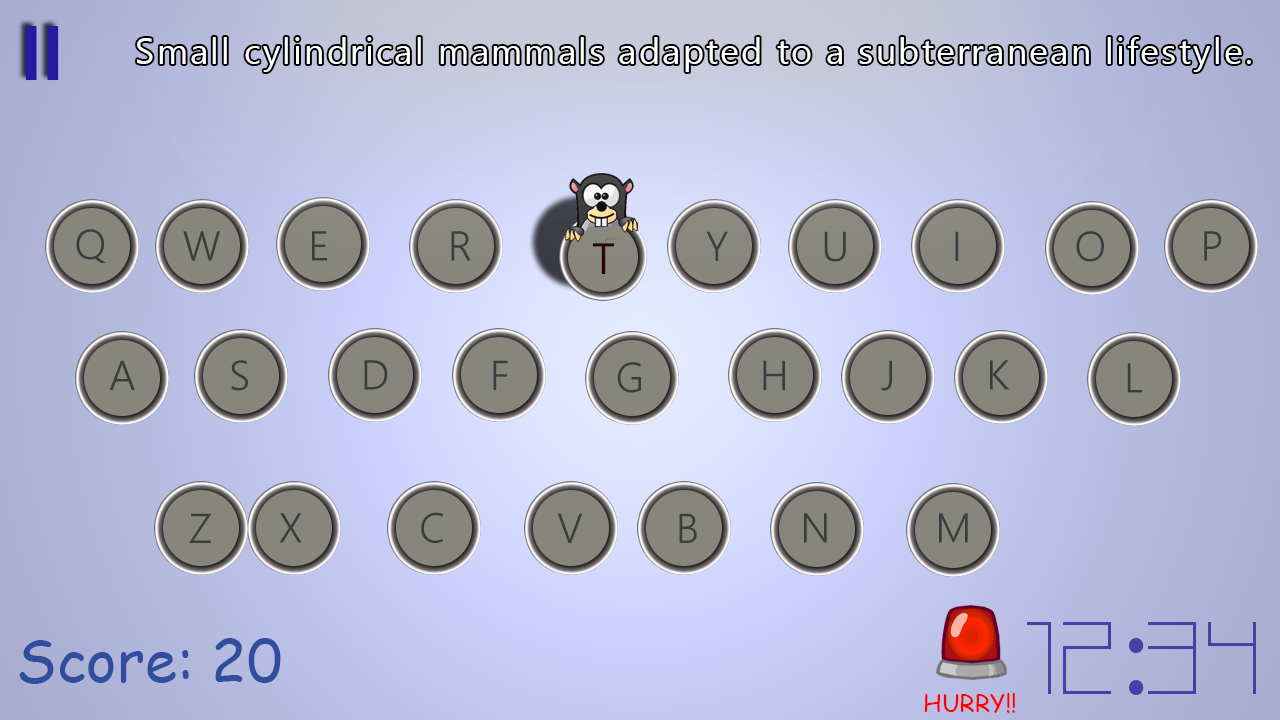
<style>
.page{position:relative;width:1280px;height:720px}
.page>*{position:absolute;margin:0}
.t1{font:36px "SegoeUI";letter-spacing:0.06em;color:#ffffff}
.t2{font:41.7px "SegoeUI-Semilight";color:#3c3c3c}
.t3{font:43.9px "SegoeUI";color:#2a0404}
.t4{font:120px "SquaredDisplay";color:#493fa6}
.t5{font:120px "MyriadPro-Regular";color:#493fa6}
.t6{font:58px "ComicSansMS";color:#304da0}
.t7{font:23.9px "ComicSansMS";color:#ff0000}
</style>
<div class="page">
<p class="t1" style="left:137px;top:37px;width:1114px;height:35px">Small cylindrical mammals adapted to a subterranean lifestyle.</p>
<p class="t2" style="left:76px;top:229px;width:30px;height:34px">Q</p>
<p class="t2" style="left:183px;top:231px;width:37px;height:30px">W</p>
<p class="t2" style="left:312px;top:231px;width:15px;height:30px">E</p>
<p class="t2" style="left:451px;top:231px;width:20px;height:30px">R</p>
<p class="t2" style="left:706px;top:231px;width:22px;height:30px">Y</p>
<p class="t2" style="left:824px;top:231px;width:22px;height:31px">U</p>
<p class="t2" style="left:955px;top:231px;width:4px;height:30px">I</p>
<p class="t2" style="left:1076px;top:231px;width:28px;height:31px">O</p>
<p class="t2" style="left:1204px;top:231px;width:18px;height:30px">P</p>
<p class="t3" style="left:593px;top:243px;width:21px;height:31px">T</p>
<p class="t2" style="left:109px;top:360px;width:26px;height:30px">A</p>
<p class="t2" style="left:231px;top:360px;width:17px;height:31px">S</p>
<p class="t2" style="left:364px;top:360px;width:24px;height:30px">D</p>
<p class="t2" style="left:493px;top:360px;width:15px;height:30px">F</p>
<p class="t2" style="left:617px;top:362px;width:24px;height:31px">G</p>
<p class="t2" style="left:763px;top:360px;width:22px;height:30px">H</p>
<p class="t2" style="left:881px;top:360px;width:11px;height:31px">J</p>
<p class="t2" style="left:990px;top:360px;width:20px;height:30px">K</p>
<p class="t2" style="left:1127px;top:363px;width:16px;height:30px">L</p>
<p class="t2" style="left:189px;top:513px;width:22px;height:30px">Z</p>
<p class="t2" style="left:279px;top:513px;width:23px;height:30px">X</p>
<p class="t2" style="left:421px;top:512px;width:22px;height:31px">C</p>
<p class="t2" style="left:557px;top:513px;width:26px;height:30px">V</p>
<p class="t2" style="left:679px;top:513px;width:18px;height:30px">B</p>
<p class="t2" style="left:804px;top:513px;width:23px;height:30px">N</p>
<p class="t2" style="left:939px;top:513px;width:29px;height:30px">M</p>
<p class="t4" style="left:1027px;top:622px;width:229px;height:73px">12<span class="t5">:</span>34</p>
<p class="t6" style="left:19px;top:638px;width:262px;height:46px">Score: 20</p>
<p class="t7" style="left:924px;top:693px;width:91px;height:20px">HURRY!!</p>
</div>
